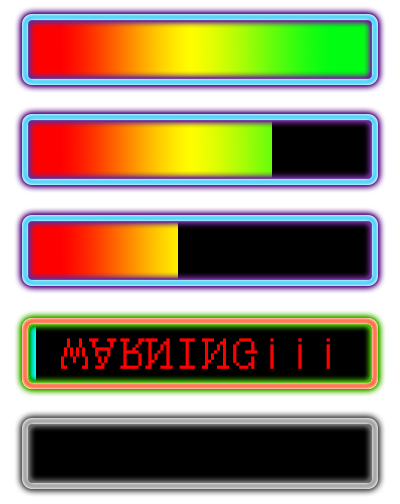
<style>
.page{position:relative;width:400px;height:504px}
.page>*{position:absolute;margin:0}
.t1{font:48.3px "Courier";letter-spacing:0.025em;color:#ff0000}
</style>
<div class="page">
<p class="t1" style="left:61px;top:338px;width:269px;height:31px">WARNING!!!</p>
</div>
